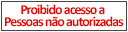
<style>
.page{position:relative;width:128px;height:32px;background:#ffffff}
.page>*{position:absolute;margin:0}
.t1{font:14px/12px "Calibri-Bold";letter-spacing:-0.07em;color:#ea0404}
</style>
<div class="page">
<p class="t1" style="left:5px;top:4px;width:119px;height:23px;text-align:center">Proibido acesso a <br>Pessoas não autorizadas</p>
</div>
